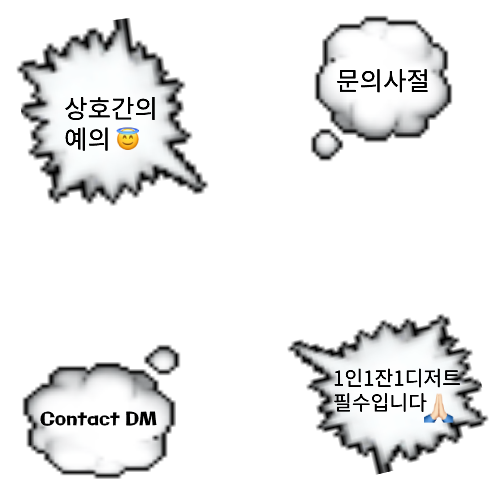
<style>
.page{position:relative;width:500px;height:500px;background:#ffffff}
.page>*{position:absolute;margin:0}
.t1{font:25.5px "NotoSansKR-Regular";color:#000000}
.t2{font:20.4px "NotoSansKR-Regular";color:#000000}
.t3{font:18.5px "Galindo-Regular";color:#000000}
</style>
<div class="page">
<p class="t1" style="left:337px;top:69px;width:91px;height:24px">문의사절</p>
<p class="t1" style="left:65px;top:96px;width:90px;height:55px">상호간의<br>예의</p>
<p class="t2" style="left:334px;top:368px;width:126px;height:44px">1인1잔1디저트<br>필수입니다</p>
<p class="t3" style="left:40px;top:411px;width:117px;height:15px">Contact DM</p>
</div>
